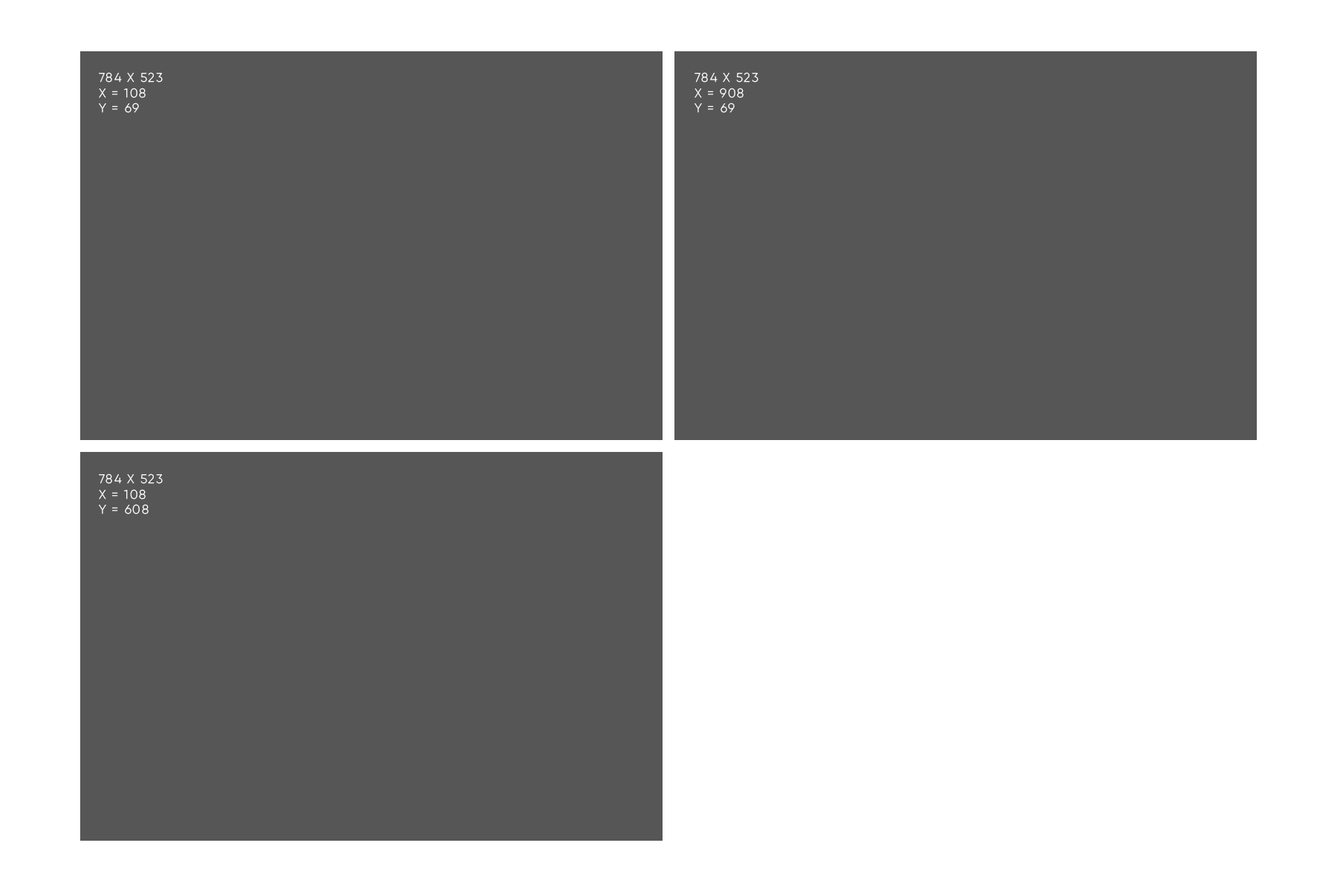
<style>
.page{position:relative;width:1337px;height:892px;background:#565656}
.page>*{position:absolute;margin:0}
.t1{font:12.6px/15.1px "Gilroy-Light";letter-spacing:0.1em;color:#ffffff;text-transform:uppercase}
</style>
<div class="page">
<p class="t1" style="left:99px;top:72px;width:64px;height:41px">784 x 523<br>X = 108<br>Y = 69</p>
<p class="t1" style="left:695px;top:72px;width:64px;height:41px">784 x 523<br>X = 908<br>Y = 69</p>
<p class="t1" style="left:99px;top:473px;width:64px;height:41px">784 x 523<br>X = 108<br>Y = 608</p>
</div>
